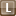
<style>
.page{position:relative;width:16px;height:16px}
.page>*{position:absolute;margin:0}
.t1{font:14px "Calibri-Bold";color:#ffffff}
</style>
<div class="page">
<p class="t1" style="left:6px;top:3px;width:6px;height:9px">L</p>
</div>
